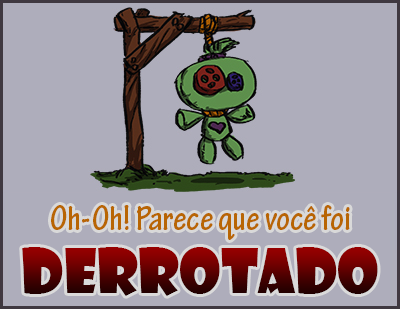
<style>
.page{position:relative;width:400px;height:309px;background:#aeadbb}
.page>*{position:absolute;margin:0}
.t1{font:36px "TektonPro-BoldCond";color:#b86503}
.t2{font:60px "ShowcardGothic-Reg"}
</style>
<div class="page">
<p class="t1" style="left:51px;top:205px;width:299px;height:35px">Oh-Oh! Parece que você foi</p>
<p class="t2" style="left:22px;top:247px;width:356px;height:49px">DERROTADO</p>
</div>
